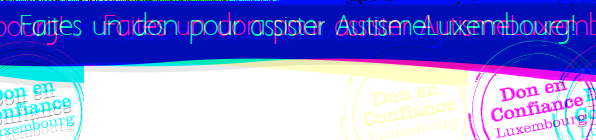
<style>
.page{position:relative;width:596px;height:140px;background:#ffffff}
.page>*{position:absolute;margin:0}
.t1{font:25px "AaarghNormal";letter-spacing:-0.04em}
</style>
<div class="page">
<p class="t1" style="left:20px;top:12px;width:555px;height:32px">Faites un don pour assister AutismeLuxembourg!</p>
</div>
